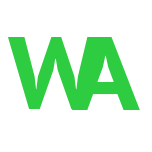
<style>
.page{position:relative;width:152px;height:152px;background:#ffffff}
.page>*{position:absolute;margin:0}
.t1{font:101px "PTSans-CaptionBold";color:#2ecc40}
.t2{font:103px "PTSans-CaptionBold";color:#2ecc40}
</style>
<div class="page">
<p class="t1" style="left:8px;top:37px;width:95px;height:72px">W</p>
<p class="t2" style="left:72px;top:37px;width:68px;height:73px">A</p>
</div>
